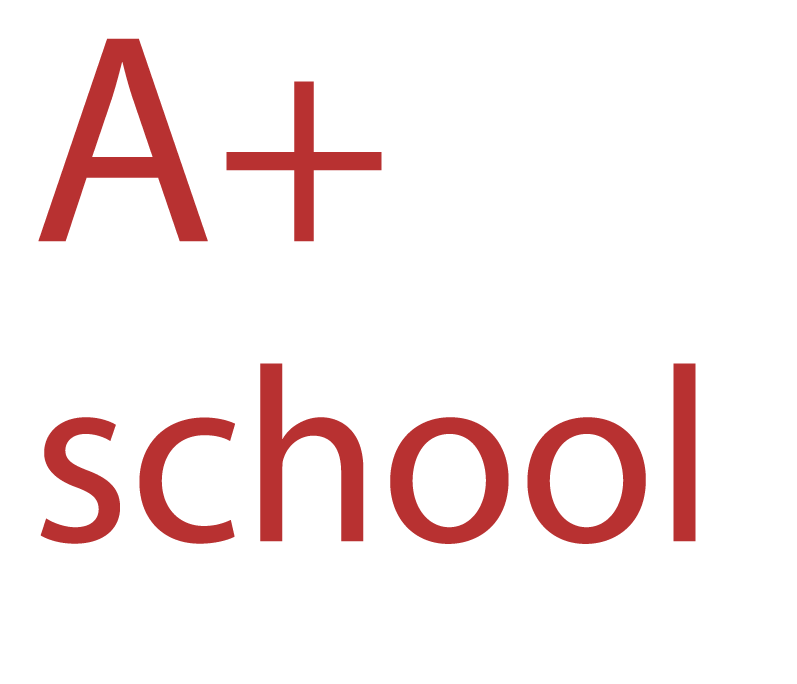
<style>
.page{position:relative;width:797px;height:684px;background:#ffffff}
.page>*{position:absolute;margin:0}
.t1{font:250px "MyriadPro-Regular";color:#b83131}
.t2{font:300px "MyriadPro-Regular";color:#b83131}
</style>
<div class="page">
<p class="t1" style="left:38px;top:38px;width:658px;height:506px"><span class="t2">A+<br></span>school</p>
</div>
